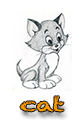
<style>
.page{position:relative;width:84px;height:120px;background:#ffffff}
.page>*{position:absolute;margin:0}
.t1{font:18.7px "Chalkduster";color:#ff9c00;scale:1.44 1}
</style>
<div class="page">
<p class="t1" style="left:20px;top:96px;width:44px;height:16px">cat</p>
</div>
